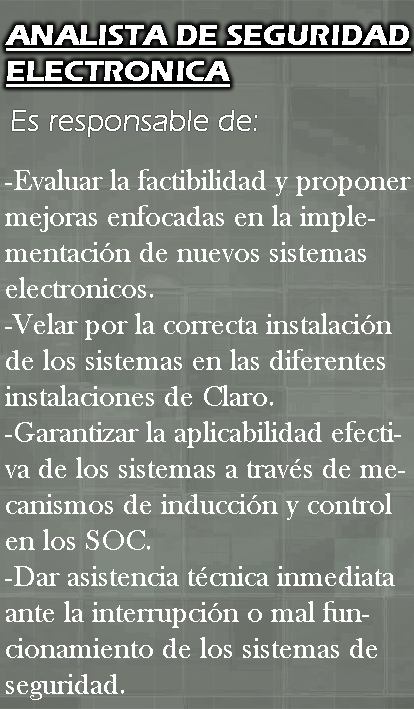
<style>
.page{position:relative;width:414px;height:709px}
.page>*{position:absolute;margin:0}
.t1{font:30px "ErasITC-Bold";color:#ffffff;text-transform:uppercase;text-decoration:underline}
.t2{font:30px "BaskOldFace";color:#ffffff}
</style>
<div class="page">
<p class="t1" style="left:5px;top:25px;width:406px;height:62px">analista de seguridad<br>electronica</p>
<p class="t2" style="left:5px;top:169px;width:406px;height:531px">-Evaluar la factibilidad y proponer<br>mejoras enfocadas en la imple-<br>mentación de nuevos sistemas <br>electronicos.<br>-Velar por la correcta instalación<br>de los sistemas en las diferentes<br>instalaciones de Claro.<br>-Garantizar la aplicabilidad efecti-<br>va de los sistemas a través de me-<br>canismos de inducción y control <br>en los SOC.<br>-Dar asistencia técnica inmediata<br>ante la interrupción o mal fun-<br>cionamiento de los sistemas de <br>seguridad.</p>
</div>
